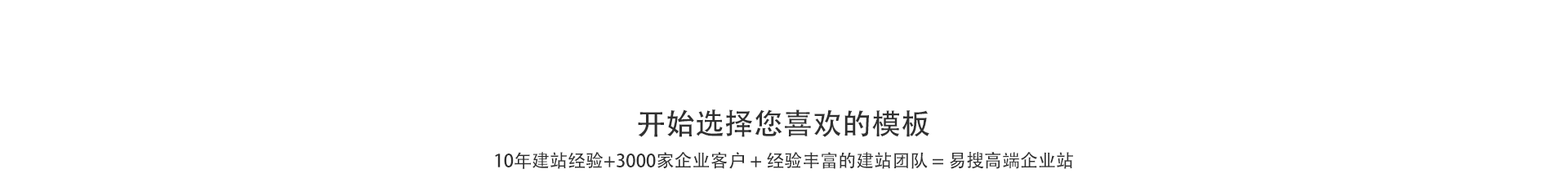
<style>
.page{position:relative;width:1568px;height:196px;background:#ffffff}
.page>*{position:absolute;margin:0}
.t1{font:29.4px "AdobeHeitiStd-Regular";color:#303030}
.t2{font:18px "AdobeHeitiStd-Regular";color:#303030}
</style>
<div class="page">
<p class="t1" style="left:638px;top:109px;width:291px;height:28px">开始选择您喜欢的模板</p>
<p class="t2" style="left:495px;top:152px;width:578px;height:17px">10年建站经验+3000家企业客户 + 经验丰富的建站团队 = 易搜高端企业站</p>
</div>
